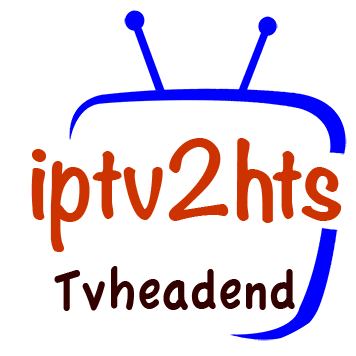
<style>
.page{position:relative;width:356px;height:356px;background:#ffffff}
.page>*{position:absolute;margin:0}
.t1{font:95.4px "Noteworthy-Bold";color:#cc3300;scale:0.95 1}
.t2{font:59.7px "AppleCasual";color:#330000;scale:0.9 1}
</style>
<div class="page">
<p class="t1" style="left:31px;top:138px;width:311px;height:114px">iptv2hts</p>
<p class="t2" style="left:54px;top:266px;width:241px;height:45px">Tvheadend</p>
</div>
